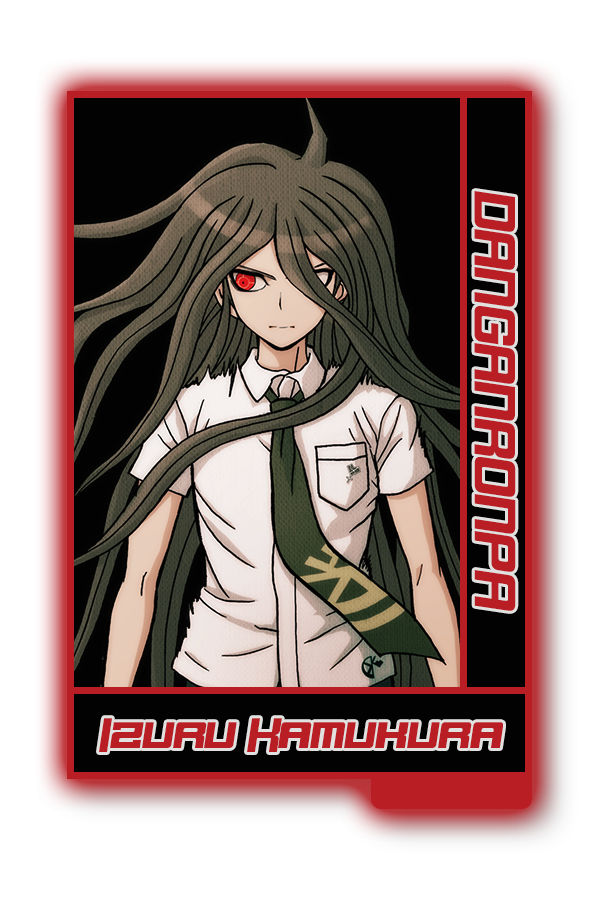
<style>
.page{position:relative;width:600px;height:900px;background:#ffffff}
.page>*{position:absolute;margin:0}
.t1{font:48.8px "DorBlue";color:#bb2c2e}
.t2{font:40.6px "DorBlue";color:#bb2c2e}
</style>
<div class="page">
<p class="t1" style="left:474px;top:191px;width:42px;height:420px;rotate:90deg">DANGANRONPA</p>
<p class="t2" style="left:99px;top:718px;width:404px;height:34px">Izuru Kamukura</p>
</div>
